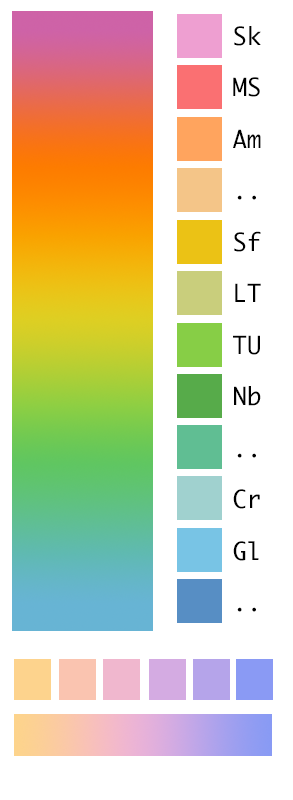
<style>
.page{position:relative;width:293px;height:800px;background:#ffffff}
.page>*{position:absolute;margin:0}
.t1{font:24px "Ayuthaya";color:#000000}
</style>
<div class="page">
<p class="t1" style="left:234px;top:26px;width:27px;height:20px">Sk</p>
<p class="t1" style="left:233px;top:77px;width:27px;height:20px">MS</p>
<p class="t1" style="left:233px;top:129px;width:28px;height:19px">Am</p>
<p class="t1" style="left:237px;top:195px;width:19px;height:5px">..</p>
<p class="t1" style="left:234px;top:231px;width:27px;height:21px">Sf</p>
<p class="t1" style="left:235px;top:283px;width:26px;height:19px">LT</p>
<p class="t1" style="left:233px;top:335px;width:27px;height:20px">TU</p>
<p class="t1" style="left:234px;top:386px;width:27px;height:20px">Nb</p>
<p class="t1" style="left:237px;top:453px;width:19px;height:5px">..</p>
<p class="t1" style="left:233px;top:489px;width:27px;height:20px">Cr</p>
<p class="t1" style="left:233px;top:541px;width:26px;height:20px">Gl</p>
<p class="t1" style="left:237px;top:607px;width:19px;height:5px">..</p>
</div>
